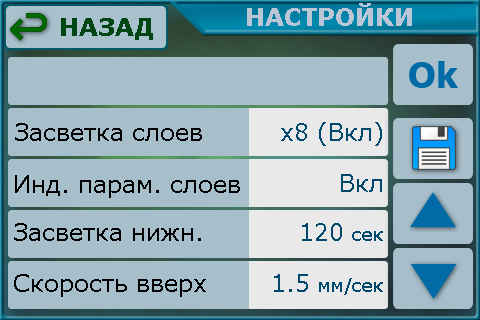
<style>
.page{position:relative;width:480px;height:320px;background:#a6bfcb}
.page>*{position:absolute;margin:0}
.t1{font:24px "Verdana-Bold";color:#bac5d5}
.t2{font:24px "Verdana-Bold";color:#004612}
.t3{font:36px "Tahoma-Bold";color:#006ba7}
.t4{font:24px "Verdana";color:#000000}
.t5{font:24px "Verdana";color:#00496c}
.t6{font:18px "Verdana";color:#00496c}
</style>
<div class="page">
<p class="t1" style="left:247px;top:3px;width:165px;height:23px">НАСТРОЙКИ</p>
<p class="t2" style="left:61px;top:18px;width:92px;height:22px">НАЗАД</p>
<p class="t3" style="left:409px;top:61px;width:49px;height:27px">Ok</p>
<p class="t4" style="left:15px;top:123px;width:187px;height:18px">Засветка слоев</p>
<p class="t5" style="left:281px;top:122px;width:101px;height:24px">x8 (Вкл)</p>
<p class="t5" style="left:341px;top:174px;width:41px;height:18px">Вкл</p>
<p class="t4" style="left:15px;top:175px;width:225px;height:23px">Инд. парам. слоев</p>
<p class="t4" style="left:14px;top:223px;width:187px;height:18px">Засветка нижн.</p>
<p class="t5" style="left:302px;top:223px;width:81px;height:18px">120 <span class="t6">сек</span></p>
<p class="t4" style="left:14px;top:274px;width:192px;height:23px">Скорость вверх</p>
<p class="t6" style="left:274px;top:274px;width:109px;height:21px"><span class="t5">1.5 </span>мм/сек</p>
</div>
